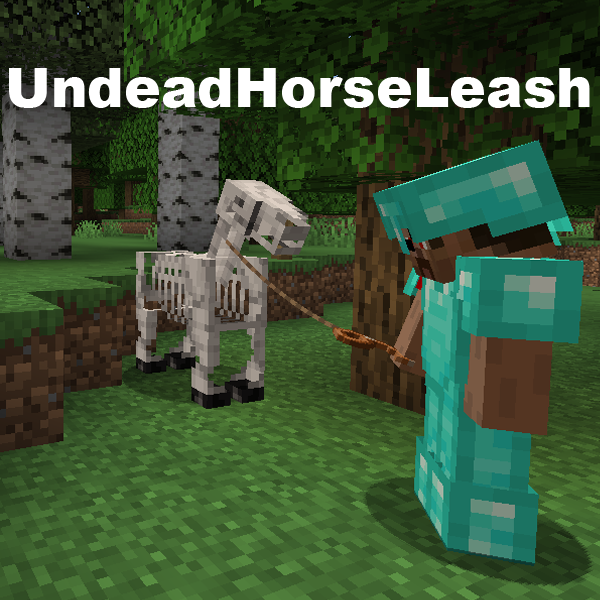
<style>
.page{position:relative;width:600px;height:600px}
.page>*{position:absolute;margin:0}
.t1{font:55px "Arial-Black";color:#ffffff}
</style>
<div class="page">
<p class="t1" style="left:9px;top:68px;width:581px;height:40px">UndeadHorseLeash</p>
</div>
